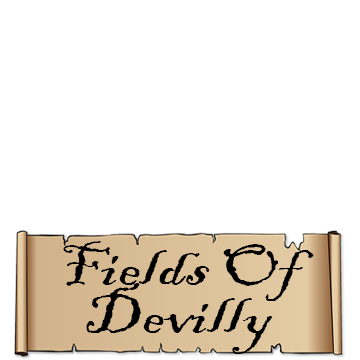
<style>
.page{position:relative;width:360px;height:360px;background:#ffffff}
.page>*{position:absolute;margin:0}
.t1{font:59.9px/48px "BlackadderITC-Regular";color:#000000;scale:1.2 1}
</style>
<div class="page">
<p class="t1" style="left:63px;top:241px;width:251px;height:113px">Fields Of <br>  Devilly</p>
</div>
